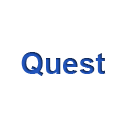
<style>
.page{position:relative;width:128px;height:128px;background:#ffffff}
.page>*{position:absolute;margin:0}
.t1{font:30px "Arial-BoldMT"}
</style>
<div class="page">
<p class="t1" style="left:21px;top:52px;width:85px;height:24px">Quest</p>
</div>
